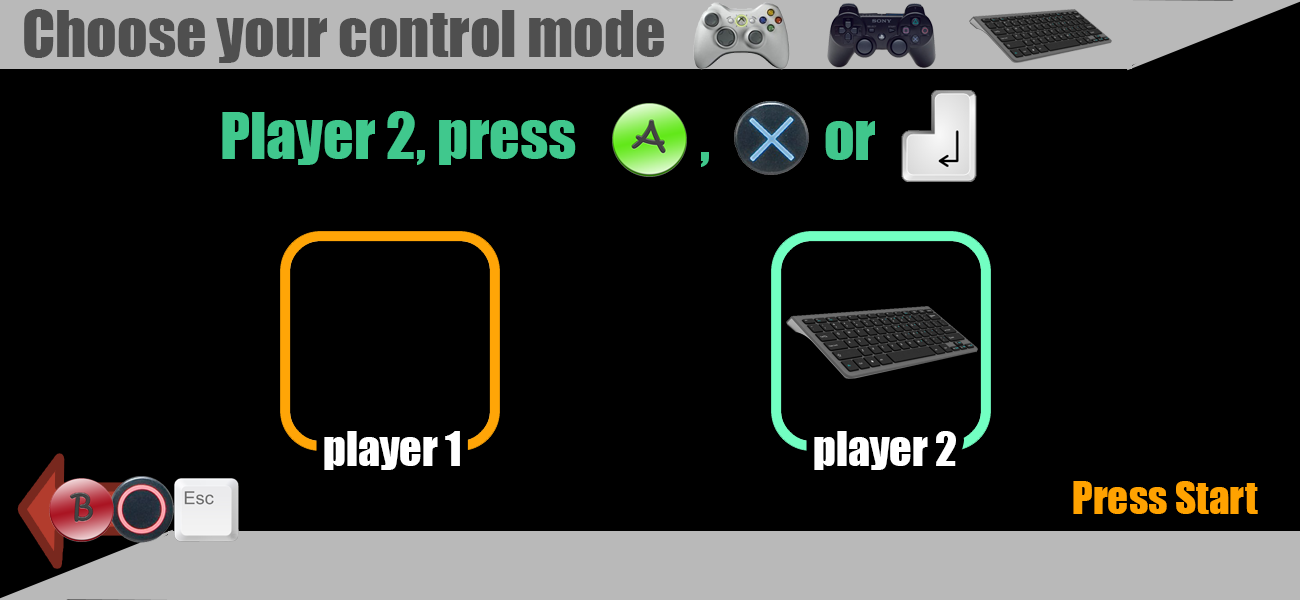
<style>
.page{position:relative;width:1300px;height:600px;background:#000000}
.page>*{position:absolute;margin:0}
.t1{font:60px "Impact";color:#4f4f4f}
.t2{font:60px "Impact";color:#40c88d}
.t3{font:60px "Impact";color:#40c78c}
.t4{font:44px "Impact";color:#ffffff}
.t5{font:41.6px "Impact";color:#ffa200}
</style>
<div class="page">
<p class="t1" style="left:24px;top:9px;width:640px;height:54px">Choose your control mode</p>
<p class="t2" style="left:222px;top:111px;width:354px;height:54px">Player 2, press</p>
<p class="t3" style="left:825px;top:121px;width:50px;height:39px">or</p>
<p class="t3" style="left:701px;top:152px;width:8px;height:15px">,</p>
<p class="t4" style="left:324px;top:431px;width:136px;height:39px">player 1</p>
<p class="t4" style="left:814px;top:431px;width:142px;height:39px">player 2</p>
<p class="t5" style="left:1073px;top:481px;width:185px;height:33px">Press Start</p>
</div>
